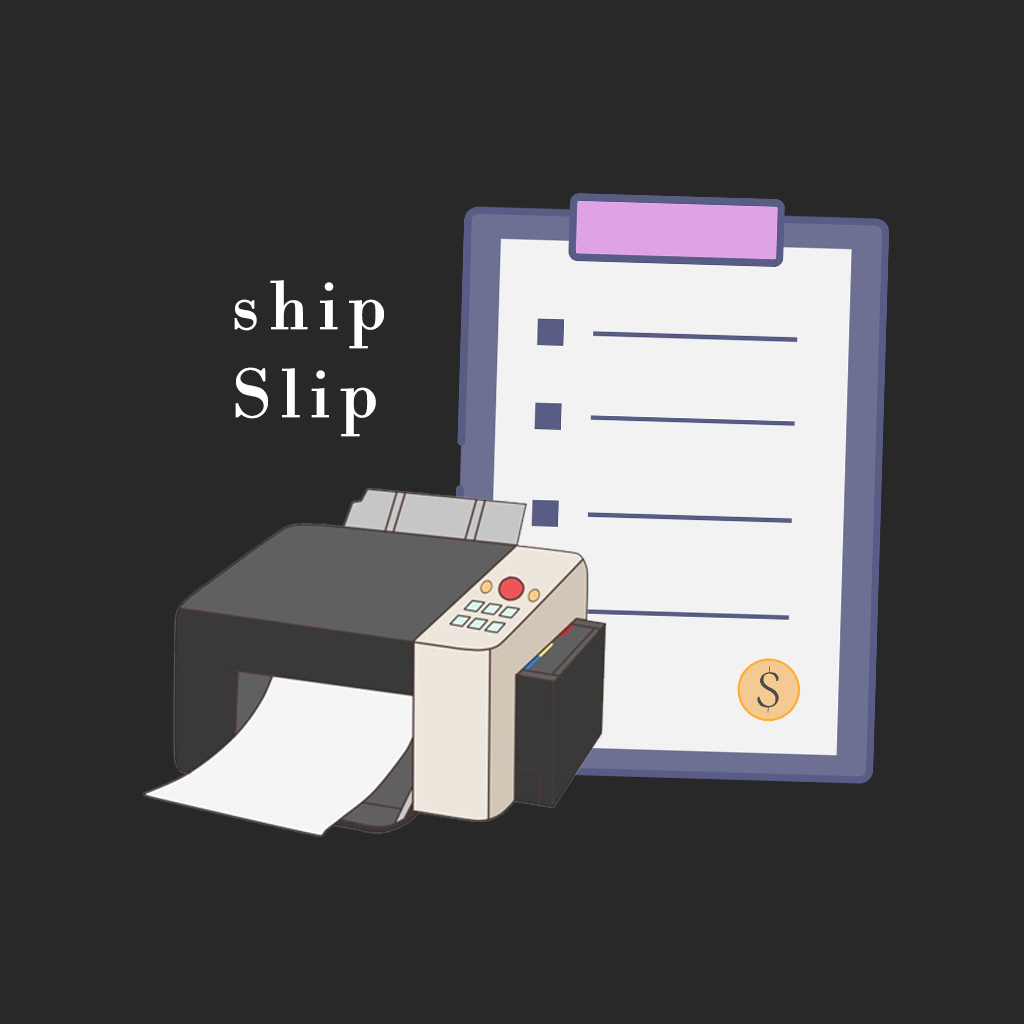
<style>
.page{position:relative;width:1024px;height:1024px;background:#282828}
.page>*{position:absolute;margin:0}
.t1{font:73.3px "BodoniMT";letter-spacing:0.1em;color:#ffffff;font-weight:bold}
</style>
<div class="page">
<p class="t1" style="left:234px;top:280px;width:150px;height:157px">ship<br>Slip</p>
</div>
